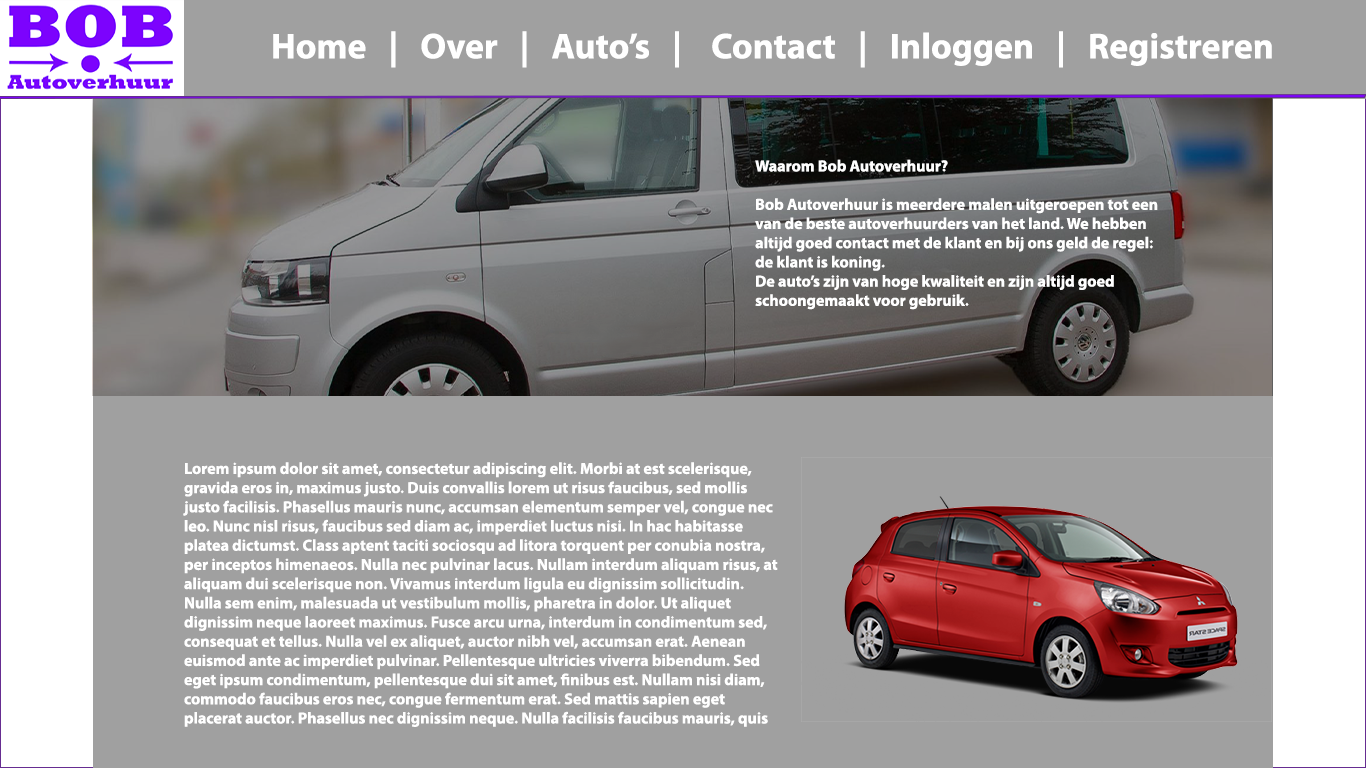
<style>
.page{position:relative;width:1366px;height:768px;background:#a0a0a0}
.page>*{position:absolute;margin:0}
.t1{font:36px "MyriadPro-Bold";color:#ffffff}
.t2{font:16px "MyriadPro-Bold";color:#ffffff}
</style>
<div class="page">
<p class="t1" style="left:273px;top:31px;width:999px;height:37px">Home   |   Over   |   Auto’s   |    Contact   |   Inloggen   |   Registreren</p>
<p class="t2" style="left:755px;top:159px;width:403px;height:151px">Waarom Bob Autoverhuur?<br><br>Bob Autoverhuur is meerdere malen uitgeroepen tot een van de beste autoverhuurders van het land. We hebben altijd goed contact met de klant en bij ons geld de regel: de klant is koning.<br>De auto’s zijn van hoge kwaliteit en zijn altijd goed schoongemaakt voor gebruik.</p>
<p class="t2" style="left:183px;top:462px;width:595px;height:265px">Lorem ipsum dolor sit amet, consectetur adipiscing elit. Morbi at est scelerisque, gravida eros in, maximus justo. Duis convallis lorem ut risus faucibus, sed mollis justo facilisis. Phasellus mauris nunc, accumsan elementum semper vel, congue nec leo. Nunc nisl risus, faucibus sed diam ac, imperdiet luctus nisi. In hac habitasse platea dictumst. Class aptent taciti sociosqu ad litora torquent per conubia nostra, per inceptos himenaeos. Nulla nec pulvinar lacus. Nullam interdum aliquam risus, at aliquam dui scelerisque non. Vivamus interdum ligula eu dignissim sollicitudin. Nulla sem enim, malesuada ut vestibulum mollis, pharetra in dolor. Ut aliquet dignissim neque laoreet maximus. Fusce arcu urna, interdum in condimentum sed, consequat et tellus. Nulla vel ex aliquet, auctor nibh vel, accumsan erat. Aenean euismod ante ac imperdiet pulvinar. Pellentesque ultricies viverra bibendum. Sed eget ipsum condimentum, pellentesque dui sit amet, finibus est. Nullam nisi diam, commodo faucibus eros nec, congue fermentum erat. Sed mattis sapien eget placerat auctor. Phasellus nec dignissim neque. Nulla facilisis faucibus mauris, quis rhoncus eros sodales id.</p>
</div>
